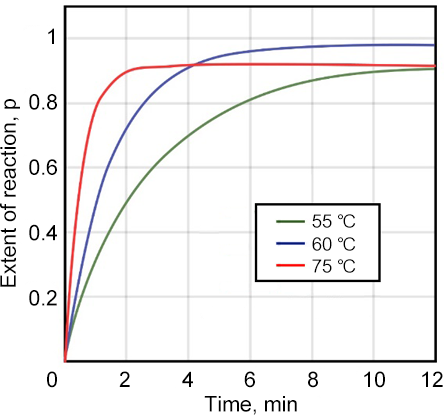
<style>
.page{position:relative;width:444px;height:415px;background:#ffffff}
.page>*{position:absolute;margin:0}
.t1{font:21.4px "ArialMT";color:#000000}
.t2{font:21.4px "ArialUnicodeMS";color:#000000}
.t3{font:18.3px "ArialUnicodeMS";color:#000000}
</style>
<div class="page">
<p class="t1" style="left:29px;top:28px;width:28px;height:278px;text-align:right">1<br>0.8<br>0.6<br>0.4<br>0.2</p>
<p class="t2" style="left:0px;top:99px;width:20px;height:188px;rotate:-90deg">Extent of reaction, p</p>
<p class="t3" style="left:312px;top:214px;width:44px;height:14px">55 ℃</p>
<p class="t3" style="left:312px;top:237px;width:44px;height:14px">60 ℃</p>
<p class="t3" style="left:312px;top:259px;width:44px;height:14px">75 ℃</p>
<p class="t1" style="left:47px;top:371px;width:10px;height:17px">0</p>
<p class="t1" style="left:119px;top:371px;width:11px;height:16px">2</p>
<p class="t1" style="left:182px;top:371px;width:11px;height:16px">4</p>
<p class="t1" style="left:244px;top:371px;width:11px;height:17px">6</p>
<p class="t1" style="left:308px;top:371px;width:10px;height:17px">8</p>
<p class="t1" style="left:364px;top:371px;width:21px;height:17px">10</p>
<p class="t1" style="left:422px;top:371px;width:21px;height:16px">12</p>
<p class="t1" style="left:204px;top:396px;width:93px;height:19px">Time, min</p>
</div>
